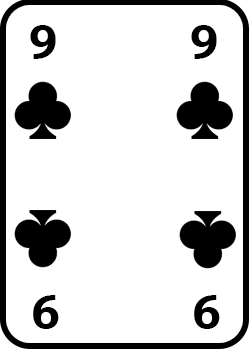
<style>
.page{position:relative;width:250px;height:350px;background:#ffffff}
.page>*{position:absolute;margin:0}
.t1{font:48px "BookmanOldStyle-Bold";letter-spacing:-0.04em;color:#000000;scale:0.9 1}
</style>
<div class="page">
<p class="t1" style="left:30px;top:25px;width:26px;height:34px">9</p>
<p class="t1" style="left:191px;top:25px;width:26px;height:34px">9</p>
<p class="t1" style="left:33px;top:295px;width:26px;height:34px;rotate:180deg">9</p>
<p class="t1" style="left:194px;top:295px;width:26px;height:34px;rotate:180deg">9</p>
</div>
